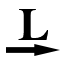
<style>
.page{position:relative;width:64px;height:64px;background:#ffffff}
.page>*{position:absolute;margin:0}
.t1{font:49.4px "BellMTBold";color:#000000}
</style>
<div class="page">
<p class="t1" style="left:18px;top:9px;width:30px;height:31px">L</p>
</div>
